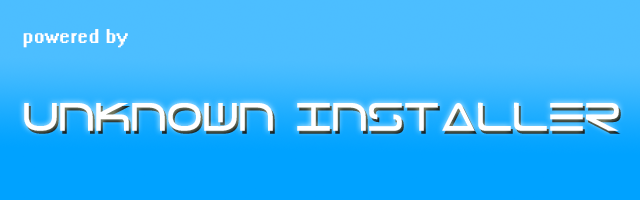
<style>
.page{position:relative;width:640px;height:200px;background:#00a2ff}
.page>*{position:absolute;margin:0}
.t1{font:18px "System";color:#ffffff}
.t2{font:36px "Tele-Marines";color:#ffffff}
</style>
<div class="page">
<p class="t1" style="left:23px;top:29px;width:105px;height:19px">powered by</p>
<p class="t2" style="left:24px;top:102px;width:595px;height:29px">Unknown Installer</p>
</div>
